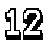
<style>
.page{position:relative;width:48px;height:48px;background:#ffffff}
.page>*{position:absolute;margin:0}
.t1{font:36px "KarmaFuture-Regular";color:#010101}
</style>
<div class="page">
<p class="t1" style="left:5px;top:8px;width:38px;height:32px">12</p>
</div>
